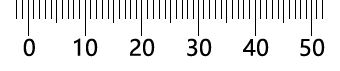
<style>
.page{position:relative;width:340px;height:71px;background:#ffffff}
.page>*{position:absolute;margin:0}
.t1{font:22px "MicrosoftYaHei";letter-spacing:0.015em;color:#000000}
</style>
<div class="page">
<p class="t1" style="left:23px;top:38px;width:12px;height:19px">0</p>
<p class="t1" style="left:74px;top:38px;width:24px;height:19px">10</p>
<p class="t1" style="left:130px;top:38px;width:25px;height:19px">20</p>
<p class="t1" style="left:187px;top:38px;width:25px;height:19px">30</p>
<p class="t1" style="left:243px;top:38px;width:26px;height:19px">40</p>
<p class="t1" style="left:300px;top:38px;width:25px;height:19px">50</p>
</div>
